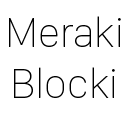
<style>
.page{position:relative;width:128px;height:128px;background:#ffffff}
.page>*{position:absolute;margin:0}
.t1{font:43px "SanFranciscoDisplay-Ultralight";color:#000000}
</style>
<div class="page">
<p class="t1" style="left:9px;top:16px;width:112px;height:82px;text-align:center">Meraki<br>Blocki</p>
</div>
